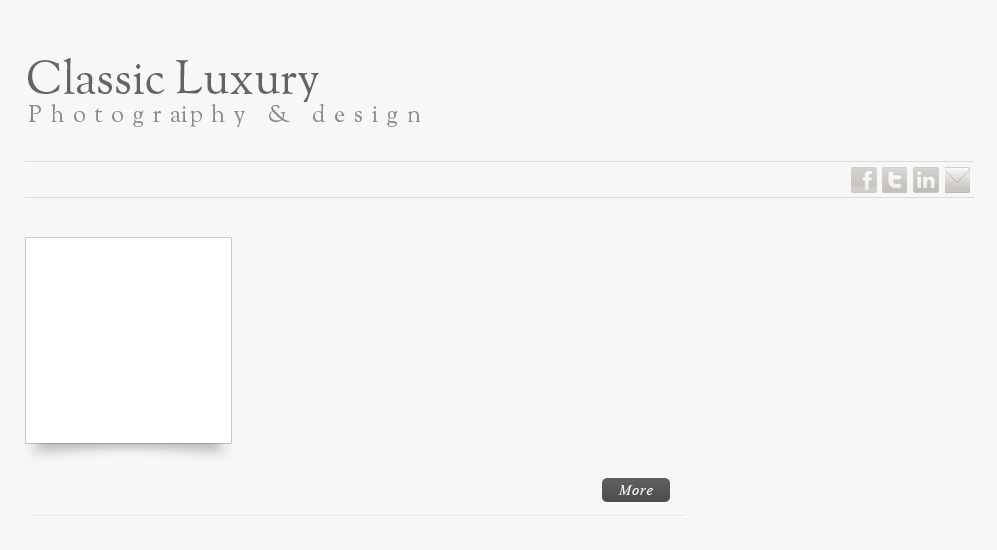
<style>
.page{position:relative;width:997px;height:550px;background:#f7f7f7}
.page>*{position:absolute;margin:0}
.t1{font:45.6px "OFLGoudyStM";color:#636363}
.t2{font:24px "OFLGoudyStM";letter-spacing:0.35em;color:#8b8b8b}
.t3{font:18px "Vijaya";letter-spacing:0.05em;color:#f7f7f7}
</style>
<div class="page">
<p class="t1" style="left:28px;top:58px;width:291px;height:44px">Classic Luxury</p>
<p class="t2" style="left:28px;top:103px;width:393px;height:24px">Photography &amp; design</p>
<p class="t2" style="left:181px;top:106px;width:6px;height:16px">i</p>
<p class="t3" style="left:618px;top:485px;width:35px;height:10px">More</p>
</div>
